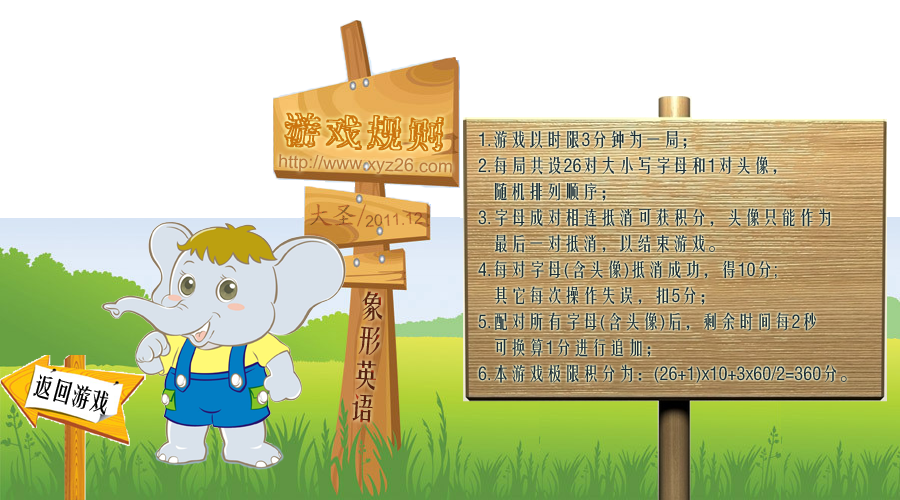
<style>
.page{position:relative;width:900px;height:500px;background:#ffffff}
.page>*{position:absolute;margin:0}
.t1{font:40px "JutzEG-Medium-GB";color:#cb740e;font-weight:bold}
.t2{font:18px/26px "FZYTK--GBK1-0";color:#1c2d36}
.t3{font:18px "ArialMT";color:#b9793c}
.t4{font:24px "FZYTK--GBK1-0";letter-spacing:-0.2em;color:#000000}
</style>
<div class="page">
<p class="t1" style="left:284px;top:112px;width:160px;height:40px;rotate:2deg">游戏规则</p>
<p class="t2" style="left:478px;top:130px;width:369px;height:253px">1.游戏以时限3分钟为一局；<br>2.每局共设26对大小写字母和1对头像，<br>   随机排列顺序；<br>3.字母成对相连抵消可获积分，头像只能作为<br>   最后一对抵消，以结束游戏。<br>4.每对字母(含头像)抵消成功，得10分;<br>   其它每次操作失误，扣5分；<br>5.配对所有字母(含头像)后，剩余时间每2秒<br>   可换算1分进行追加；<br>6.本游戏极限积分为：(26+1)x10+3x60/2=360分。</p>
<p class="t3" style="left:279px;top:154px;width:173px;height:20px;rotate:2deg">http://www.xyz26.com</p>
<p class="t4" style="left:33px;top:374px;width:76px;height:41px;rotate:15deg">返回游戏</p>
</div>
